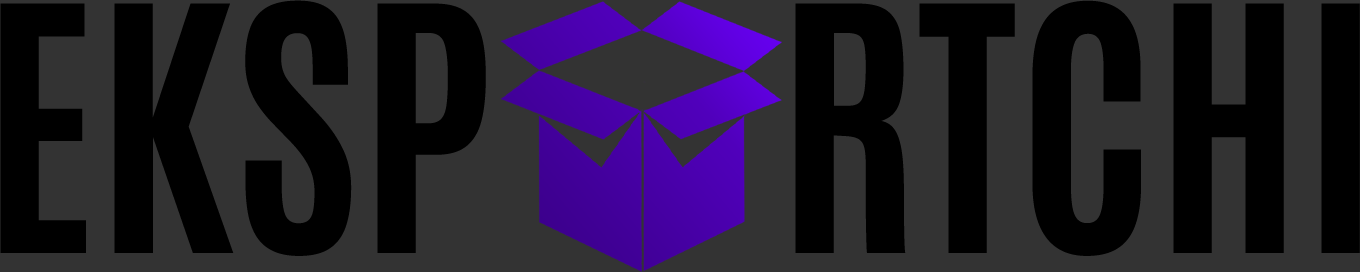
<style>
.page{position:relative;width:1360px;height:272px;background:#333333}
.page>*{position:absolute;margin:0}
.t1{font:290.1px "Antonio-Bold";color:#000000}
</style>
<div class="page">
<p class="t1" style="left:0px;top:0px;width:1360px;height:256px">EKSP      RTCHI</p>
</div>
